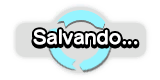
<style>
.page{position:relative;width:160px;height:80px;background:#ffffff}
.page>*{position:absolute;margin:0}
.t1{font:18px "SeuratPro-B";color:#ffffff}
</style>
<div class="page">
<p class="t1" style="left:33px;top:30px;width:105px;height:16px">Salvando...</p>
<p class="t1" style="left:33px;top:29px;width:105px;height:16px">Salvando...</p>
</div>
